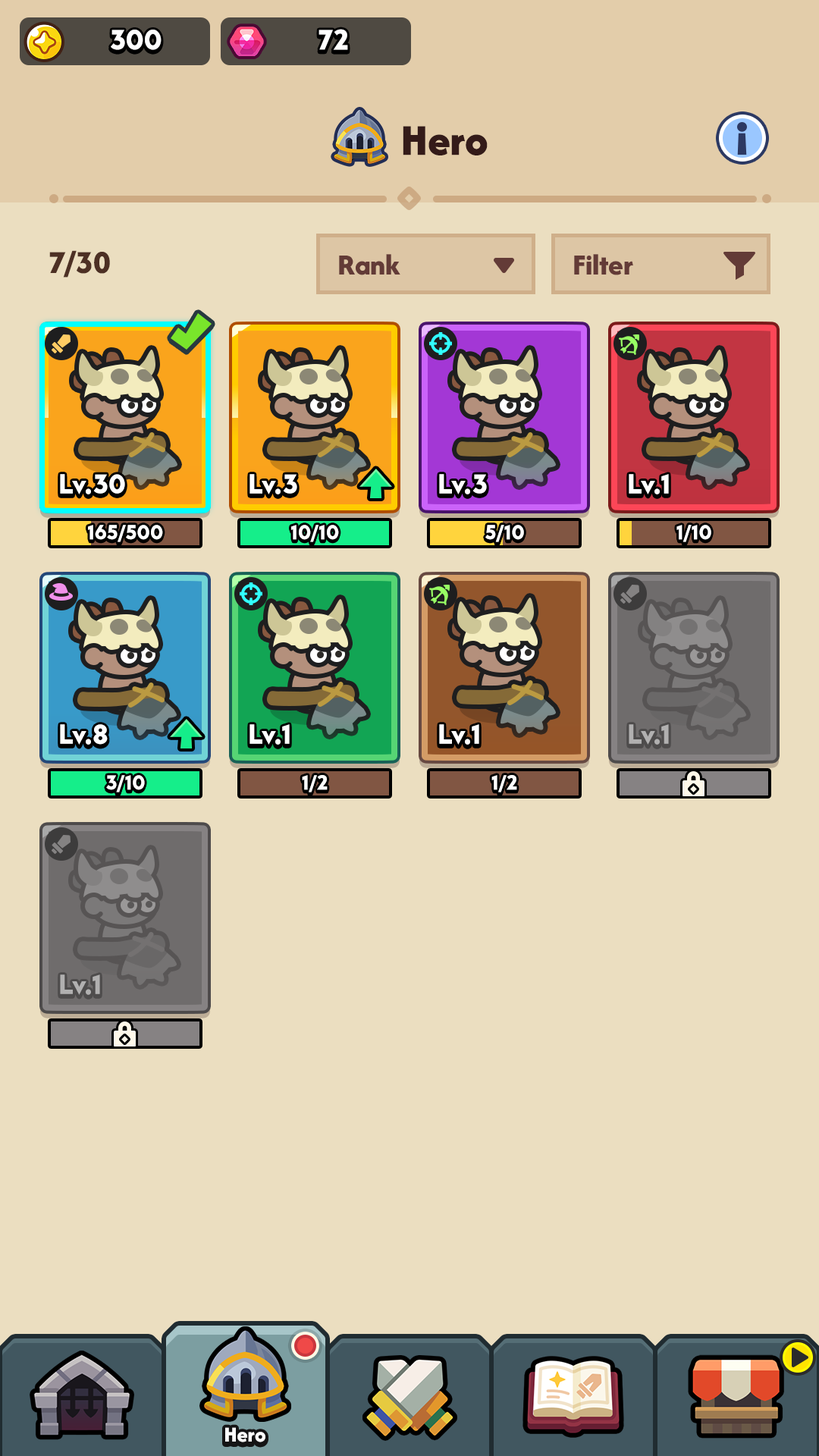
<style>
.page{position:relative;width:819px;height:1456px;background:#ebdec0}
.page>*{position:absolute;margin:0}
.t1{font:29.6px "LTAvocado-Bold";color:#ffffff}
.t2{font:45.5px "AfacadFlux-ExtraBold";color:#341b19}
.t3{font:33.4px "AfacadFlux-ExtraBold";color:#4d3024}
.t4{font:30.3px "AfacadFlux-ExtraBold";color:#633b37}
.t5{font:28.4px "LTAvocado-Bold";color:#ffffff}
.t6{font:21.2px "LTAvocado-Bold";color:#ffffff}
.t7{font:28.4px "LTAvocado-Bold";color:#b1b0b0}
.t8{font:22px "AfacadFlux-ExtraBold";color:#ffffff}
</style>
<div class="page">
<p class="t1" style="left:111px;top:30px;width:51px;height:20px">300</p>
<p class="t1" style="left:318px;top:29px;width:30px;height:21px">72</p>
<p class="t2" style="left:403px;top:126px;width:85px;height:29px">Hero</p>
<p class="t3" style="left:49px;top:250px;width:61px;height:28px">7/30</p>
<p class="t4" style="left:339px;top:254px;width:61px;height:21px">Rank</p>
<p class="t4" style="left:574px;top:254px;width:59px;height:21px">Filter</p>
<p class="t5" style="left:60px;top:474px;width:65px;height:20px">Lv.30</p>
<p class="t5" style="left:249px;top:474px;width:48px;height:20px">Lv.3</p>
<p class="t5" style="left:439px;top:474px;width:48px;height:20px">Lv.3</p>
<p class="t5" style="left:629px;top:474px;width:40px;height:20px">Lv.1</p>
<p class="t6" style="left:88px;top:525px;width:75px;height:17px">165/500</p>
<p class="t6" style="left:291px;top:525px;width:48px;height:17px">10/10</p>
<p class="t6" style="left:485px;top:525px;width:39px;height:17px">5/10</p>
<p class="t6" style="left:676px;top:525px;width:35px;height:17px">1/10</p>
<p class="t5" style="left:60px;top:724px;width:48px;height:21px">Lv.8</p>
<p class="t5" style="left:249px;top:724px;width:41px;height:21px">Lv.1</p>
<p class="t5" style="left:439px;top:724px;width:40px;height:21px">Lv.1</p>
<p class="t7" style="left:629px;top:724px;width:40px;height:21px">Lv.1</p>
<p class="t6" style="left:106px;top:775px;width:39px;height:17px">3/10</p>
<p class="t6" style="left:302px;top:775px;width:26px;height:17px">1/2</p>
<p class="t6" style="left:491px;top:775px;width:26px;height:17px">1/2</p>
<p class="t7" style="left:60px;top:974px;width:40px;height:21px">Lv.1</p>
<p class="t8" style="left:225px;top:1427px;width:40px;height:15px">Hero</p>
</div>
